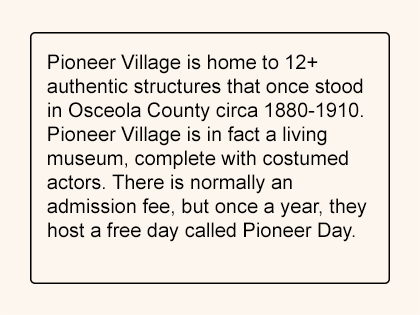
<style>
.page{position:relative;width:420px;height:315px;background:#fdf6ee}
.page>*{position:absolute;margin:0}
.t1{font:20px "ArialMT";color:#000000}
</style>
<div class="page">
<p class="t1" style="left:47px;top:54px;width:320px;height:188px">Pioneer Village is home to 12+ <br>authentic structures that once stood <br>in Osceola County circa 1880-1910. <br>Pioneer Village is in fact a living<br>museum, complete with costumed<br>actors. There is normally an <br>admission fee, but once a year, they<br>host a free day called Pioneer Day.</p>
</div>
